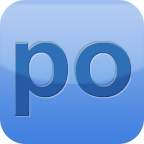
<style>
.page{position:relative;width:144px;height:144px}
.page>*{position:absolute;margin:0}
.t1{font:102.5px "Arial-BoldMT";color:#265ba3}
</style>
<div class="page">
<p class="t1" style="left:15px;top:41px;width:116px;height:76px">po</p>
</div>
